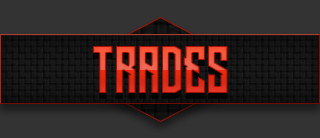
<style>
.page{position:relative;width:320px;height:138px;background:#333333}
.page>*{position:absolute;margin:0}
.t1{font:60px "LongShot"}
</style>
<div class="page">
<p class="t1" style="left:93px;top:46px;width:135px;height:47px">TRADES</p>
</div>
